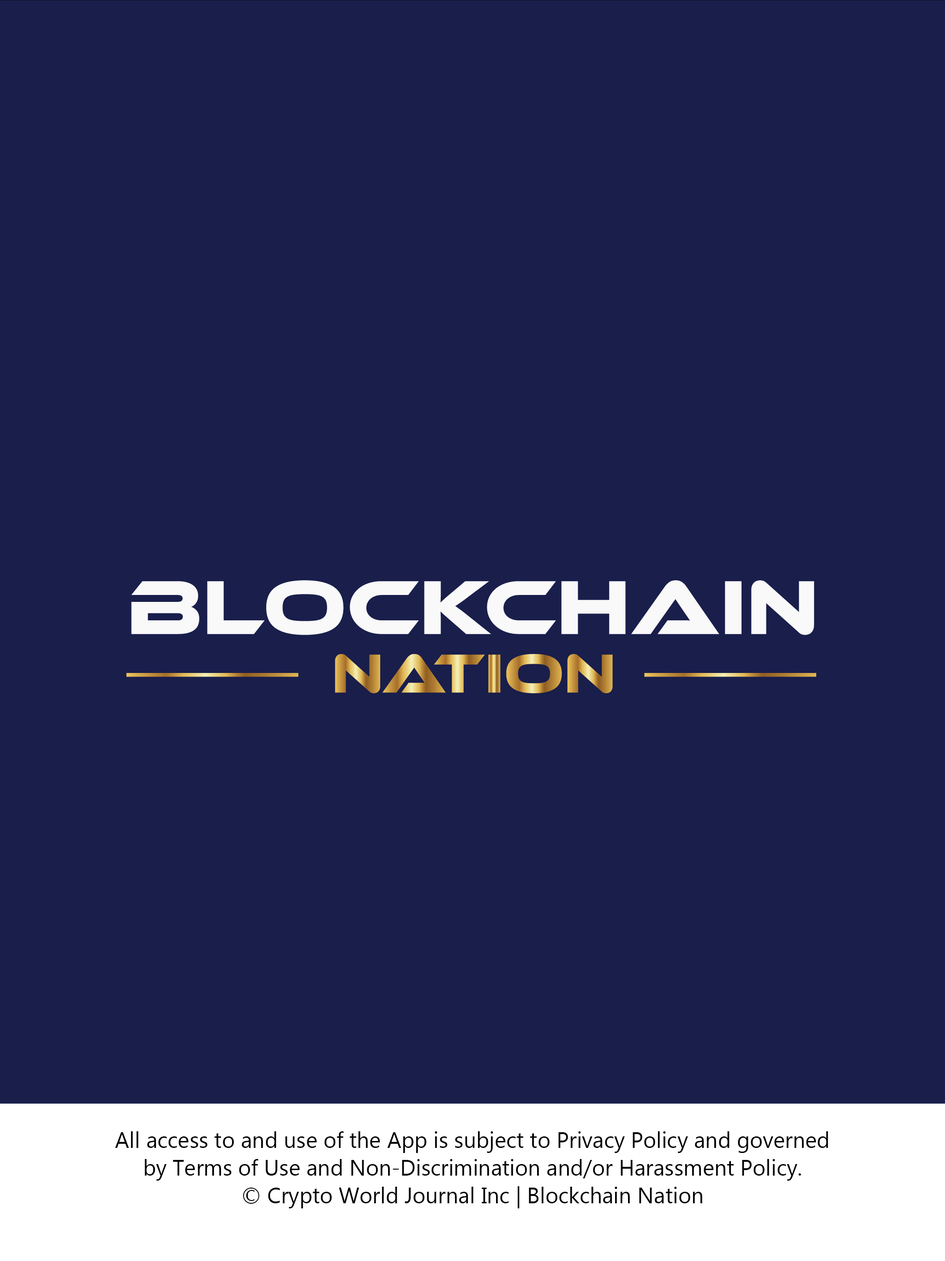
<style>
.page{position:relative;width:945px;height:1261px;background:#191e4b}
.page>*{position:absolute;margin:0}
.t1{font:22.2px/27.7px "LaoUI";color:#000000}
</style>
<div class="page">
<p class="t1" style="left:115px;top:1132px;width:714px;height:77px;text-align:center">All access to and use of the App is subject to Privacy Policy and governed<br>by Terms of Use and Non-Discrimination and/or Harassment Policy.<br>© Crypto World Journal Inc | Blockchain Nation</p>
</div>
